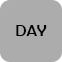
<style>
.page{position:relative;width:62px;height:62px;background:#acacac}
.page>*{position:absolute;margin:0}
.t1{font:16px "BerlinSansFB-Reg";color:#000000}
</style>
<div class="page">
<p class="t1" style="left:16px;top:25px;width:31px;height:11px">DAY</p>
</div>
